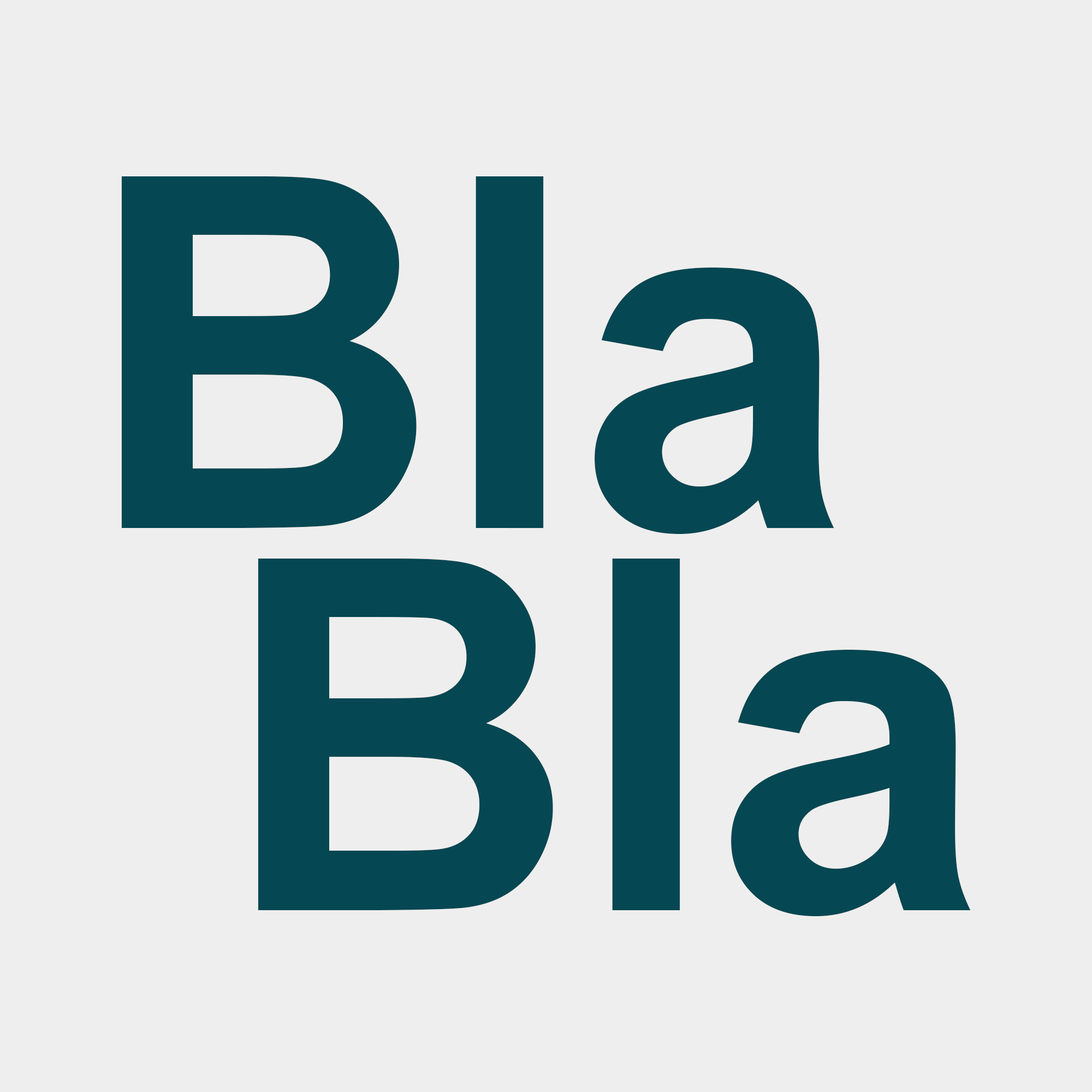
<style>
.page{position:relative;width:1092px;height:1092px;background:#eeeeee}
.page>*{position:absolute;margin:0}
.t1{font:491.4px/382.2px "Arial-BoldMT";color:#054752}
</style>
<div class="page">
<p class="t1" style="left:121px;top:176px;width:850px;height:740px;text-align:center">Bla<br>  Bla</p>
</div>
